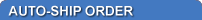
<style>
.page{position:relative;width:202px;height:20px;background:#4379c1}
.page>*{position:absolute;margin:0}
.t1{font:13.3px "Arial-BoldMT";color:#ffffff}
</style>
<div class="page">
<p class="t1" style="left:8px;top:5px;width:125px;height:11px">AUTO-SHIP ORDER</p>
</div>
